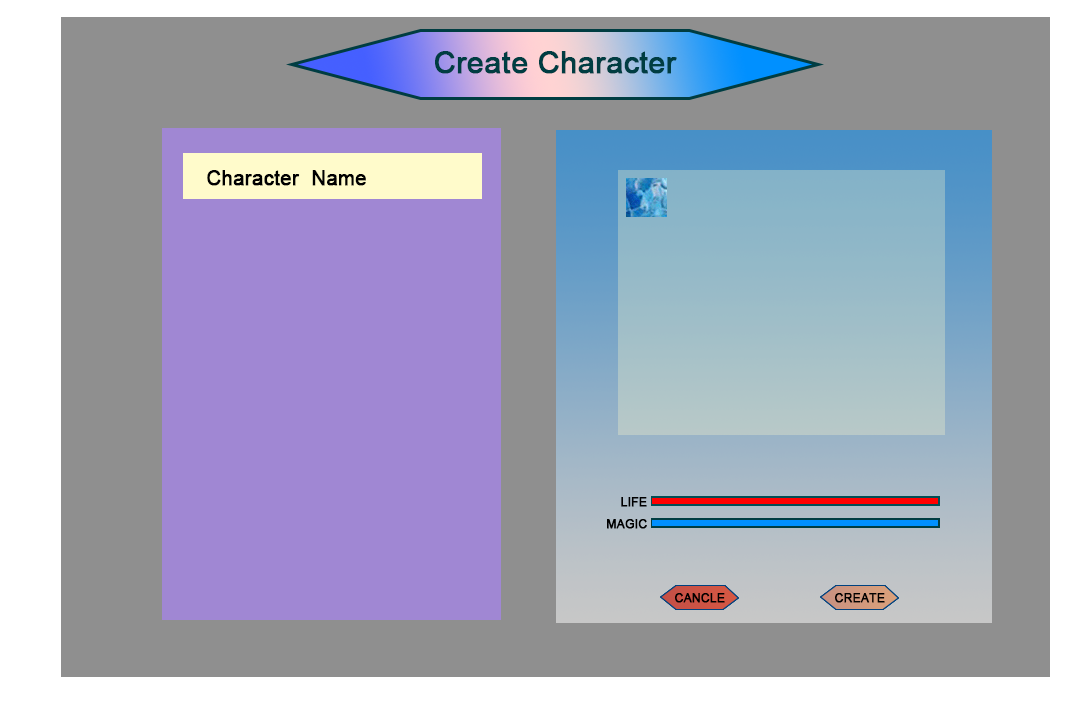
<style>
.page{position:relative;width:1080px;height:720px;background:#8f8f8f}
.page>*{position:absolute;margin:0}
.t1{font:30px "ArialMT";color:#003d42;font-weight:bold}
.t2{font:20px "ArialMT";color:#000000;font-weight:bold}
.t3{font:12px "ArialMT";color:#000000;font-weight:bold}
</style>
<div class="page">
<p class="t1" style="left:435px;top:51px;width:242px;height:23px">Create Character</p>
<p class="t2" style="left:207px;top:170px;width:159px;height:16px">Character  Name</p>
<p class="t3" style="left:621px;top:497px;width:26px;height:10px">LIFE</p>
<p class="t3" style="left:607px;top:519px;width:40px;height:10px">MAGIC</p>
<p class="t3" style="left:675px;top:593px;width:50px;height:10px">CANCLE</p>
<p class="t3" style="left:835px;top:593px;width:50px;height:10px">CREATE</p>
</div>
